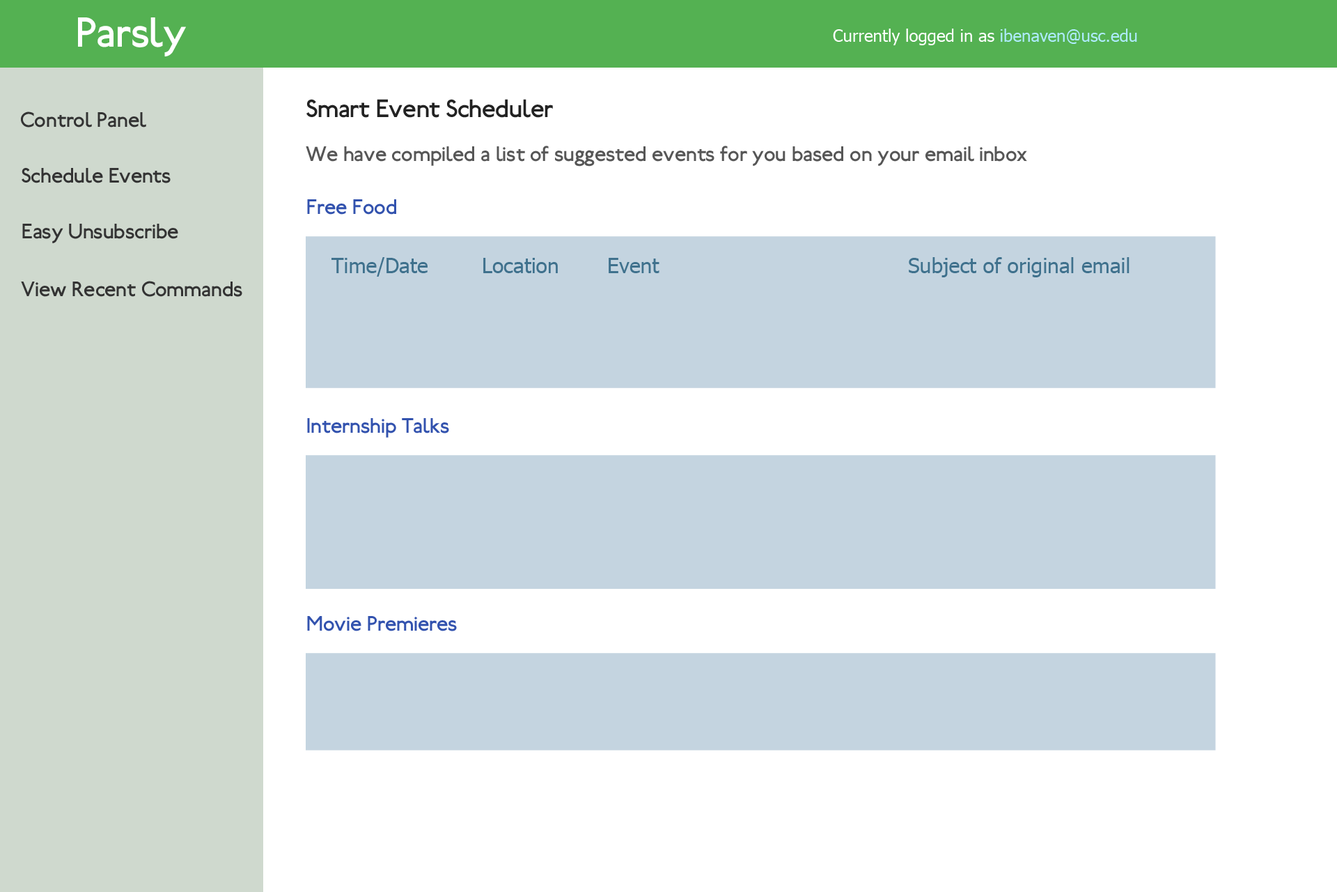
<style>
.page{position:relative;width:1337px;height:892px;background:#ffffff}
.page>*{position:absolute;margin:0}
.t1{font:41.8px "Railway";color:#ffffff}
.t2{font:16.7px "Tahoma";color:#ffffff}
.t3{font:16.7px "Tahoma";color:#afebff}
.t4{font:25.1px "Railway";color:#222222}
.t5{font:20.9px "Railway";color:#333333}
.t6{font:20.9px "Railway";color:#565656}
.t7{font:20.9px "Railway";color:#3252ae}
.t8{font:20.9px "Tahoma";color:#3f718d}
</style>
<div class="page">
<p class="t1" style="left:78px;top:17px;width:108px;height:39px">Parsly</p>
<p class="t2" style="left:833px;top:29px;width:304px;height:16px">Currently logged in as <span class="t3">ibenaven@usc.edu</span></p>
<p class="t4" style="left:306px;top:99px;width:247px;height:19px">Smart Event Scheduler</p>
<p class="t5" style="left:21px;top:111px;width:125px;height:16px">Control Panel</p>
<p class="t6" style="left:306px;top:146px;width:721px;height:20px">We have compiled a list of suggested events for you based on your email inbox</p>
<p class="t5" style="left:22px;top:168px;width:149px;height:15px">Schedule Events</p>
<p class="t7" style="left:307px;top:199px;width:89px;height:16px">Free Food</p>
<p class="t5" style="left:22px;top:224px;width:156px;height:19px">Easy Unsubscribe</p>
<p class="t8" style="left:332px;top:257px;width:798px;height:20px">Time/Date   Location  Event          Subject of original email</p>
<p class="t5" style="left:21px;top:281px;width:221px;height:16px">View Recent Commands</p>
<p class="t7" style="left:307px;top:418px;width:142px;height:19px">Internship Talks</p>
<p class="t7" style="left:307px;top:616px;width:150px;height:15px">Movie Premieres</p>
</div>
